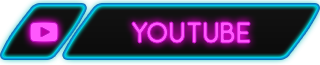
<style>
.page{position:relative;width:320px;height:65px}
.page>*{position:absolute;margin:0}
.t1{font:30px "Odin-Bold";color:#fe55fb}
</style>
<div class="page">
<p class="t1" style="left:132px;top:22px;width:118px;height:21px">YOUTUBE</p>
</div>
